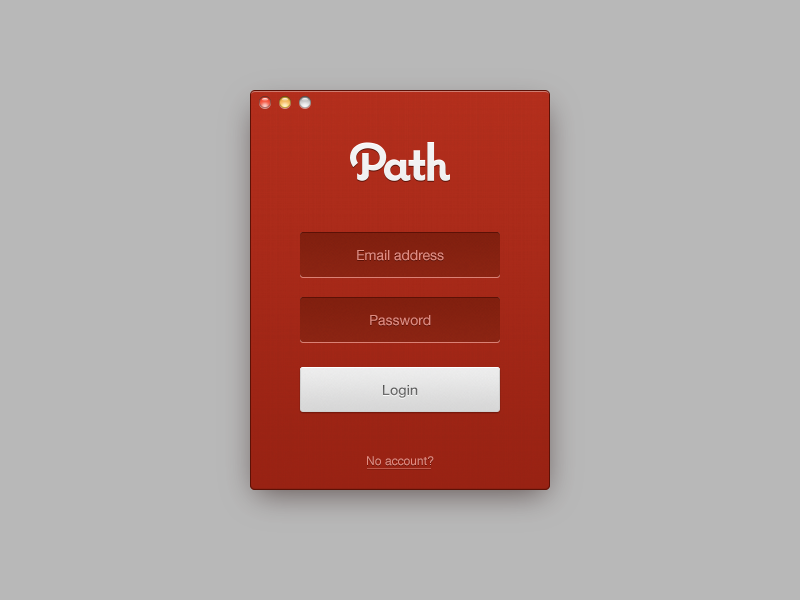
<style>
.page{position:relative;width:800px;height:600px;background:#b8b8b8}
.page>*{position:absolute;margin:0}
.t1{font:14px "HelveticaNeue";color:#e18c81}
.t2{font:14px "HelveticaNeue-Medium";color:#575757}
.t3{font:12px "Helvetica";color:#e18c81}
</style>
<div class="page">
<p class="t1" style="left:357px;top:250px;width:87px;height:11px">Email address</p>
<p class="t1" style="left:370px;top:315px;width:61px;height:11px">Password</p>
<p class="t2" style="left:383px;top:385px;width:35px;height:13px">Login</p>
<p class="t3" style="left:367px;top:456px;width:67px;height:10px">No account?</p>
</div>
